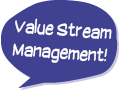
<style>
.page{position:relative;width:120px;height:90px;background:#404291}
.page>*{position:absolute;margin:0}
.t1{font:19px "SuplexmentaryComicNC";color:#ffffff;scale:0.8 1}
</style>
<div class="page">
<p class="t1" style="left:12px;top:18px;width:100px;height:45px;rotate:4deg">Value Stream<br>Management!</p>
</div>
